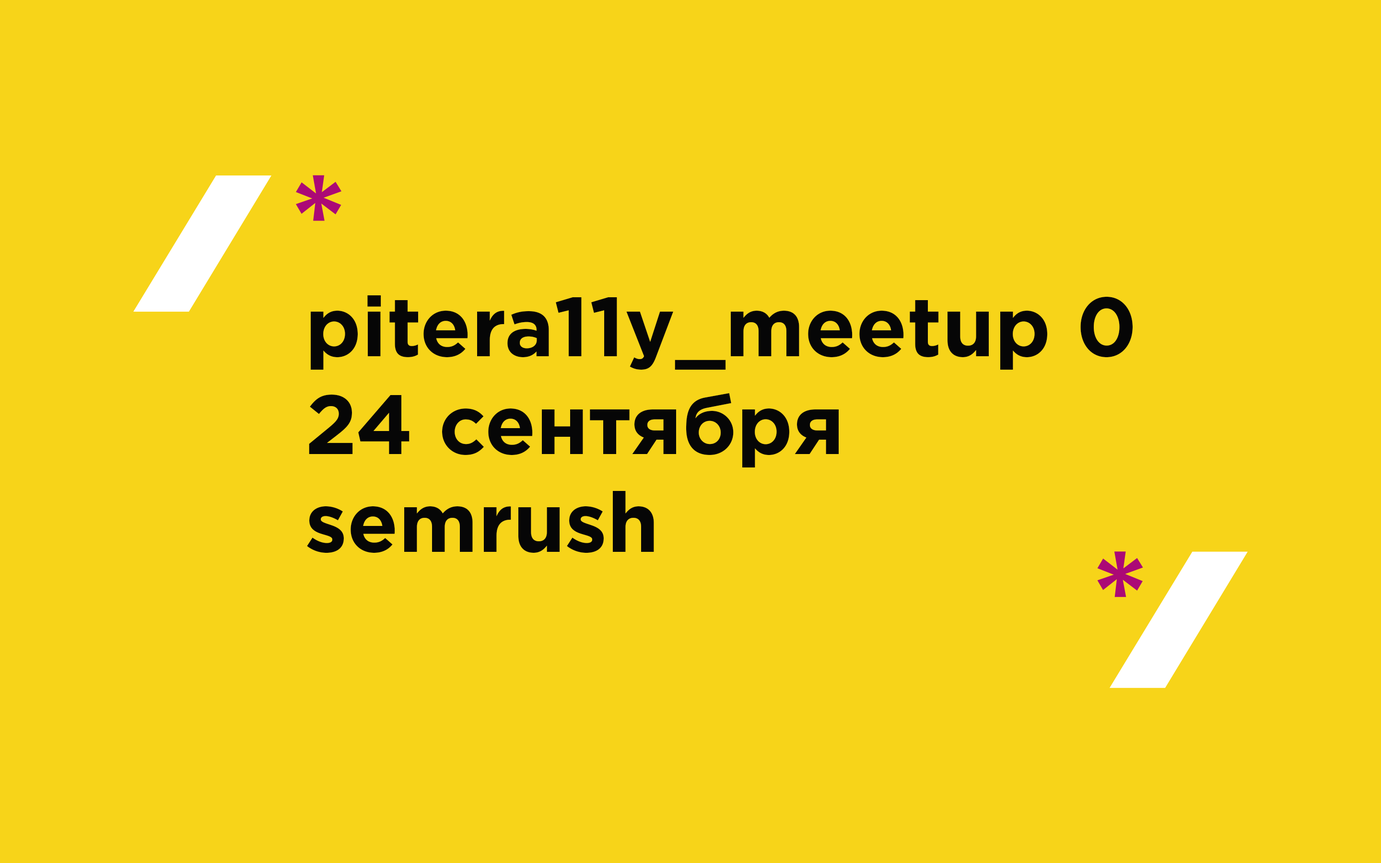
<style>
.page{position:relative;width:1381px;height:863px;background:#f7d419}
.page>*{position:absolute;margin:0}
.t1{font:83.6px/97.7px "GothamPro-Bold";color:#060606}
</style>
<div class="page">
<p class="t1" style="left:307px;top:295px;width:826px;height:258px">pitera11y_meetup 0<br>24 сентября<br>semrush</p>
</div>
